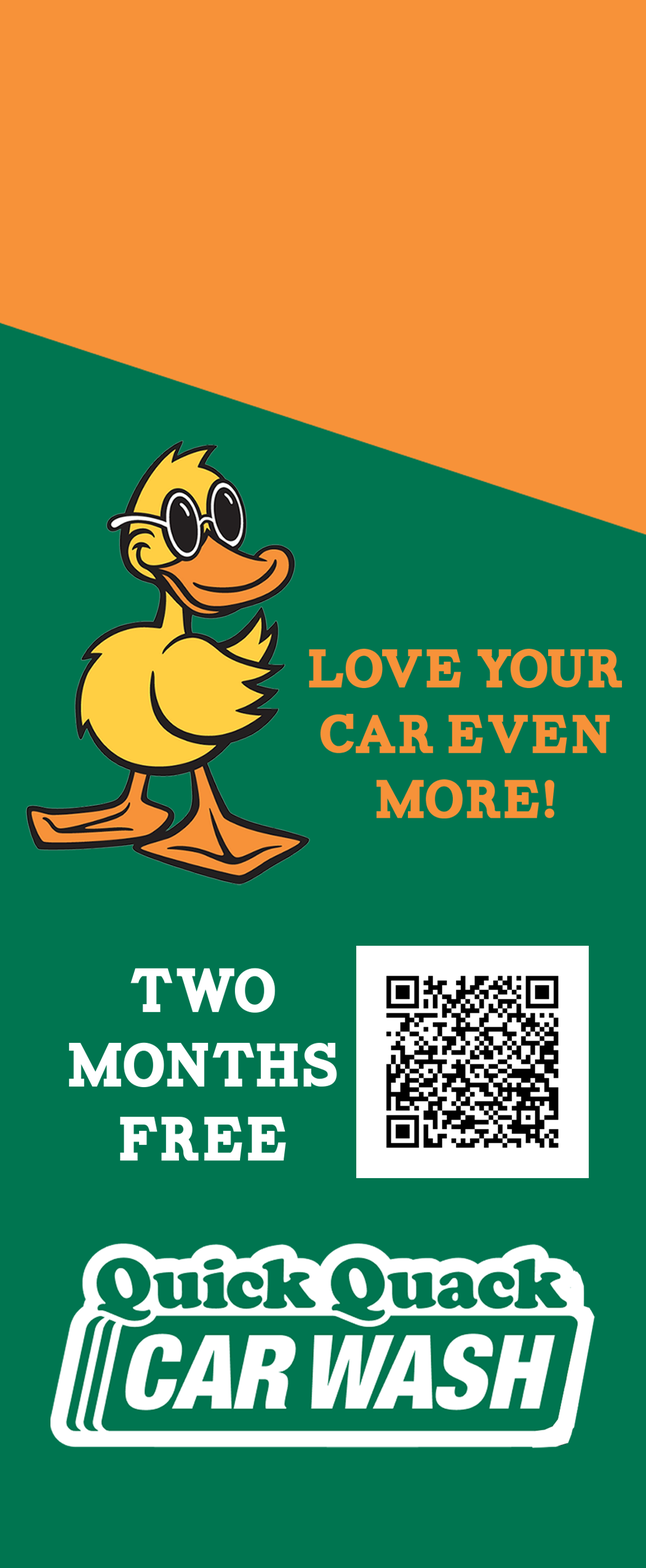
<style>
.page{position:relative;width:646px;height:1568px;background:#007550}
.page>*{position:absolute;margin:0}
.t1{font:54.6px "Carton";color:#f79239}
.t2{font:62px "Carton";color:#ffffff}
</style>
<div class="page">
<p class="t1" style="left:309px;top:649px;width:313px;height:169px;text-align:center">love your car even more!</p>
<p class="t2" style="left:69px;top:968px;width:268px;height:193px;text-align:center">Two months free</p>
</div>
